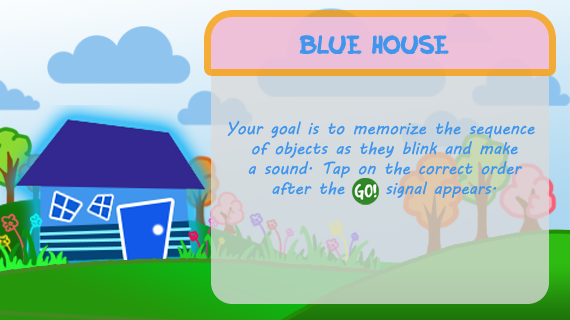
<style>
.page{position:relative;width:570px;height:320px}
.page>*{position:absolute;margin:0}
.t1{font:25px "Inky";color:#4095ec}
.t2{font:16.7px "MVBoli";color:#4095ec}
</style>
<div class="page">
<p class="t1" style="left:299px;top:35px;width:150px;height:20px">BLUE HOUSE</p>
<p class="t2" style="left:227px;top:120px;width:308px;height:78px;text-align:center">Your goal is to memorize the sequence<br> of objects as they blink and make<br> a sound. Tap on the correct order<br> after the     signal appears.</p>
</div>
